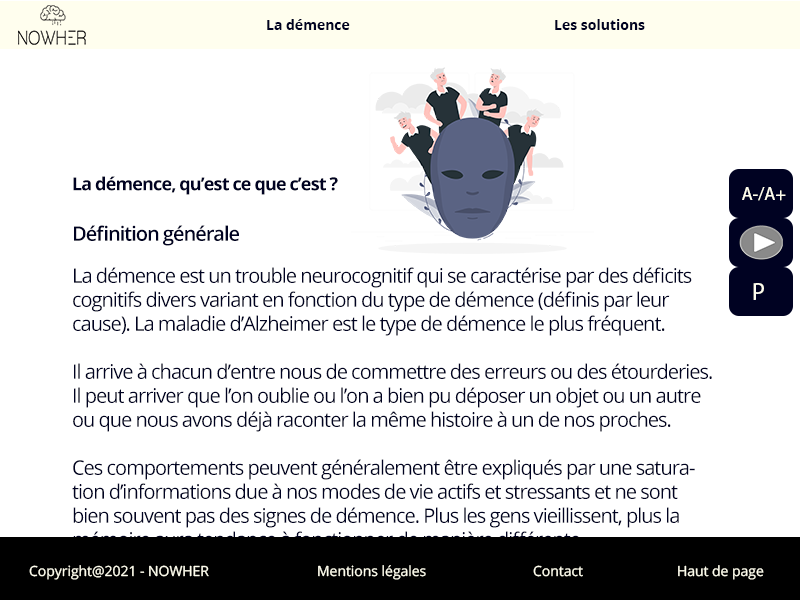
<style>
.page{position:relative;width:800px;height:600px;background:#ffffff}
.page>*{position:absolute;margin:0}
.t1{font:14px "OpenSans-Bold";color:#000222}
.t2{font:12px "MyriadPro-Regular";color:#000222}
.t3{font:18px "OpenSans-Bold";letter-spacing:-0.05em;color:#000222}
.t4{font:18px "MyriadPro-Regular";color:#fffeee}
.t5{font:20px/24px "OpenSans-Regular";letter-spacing:-0.05em;color:#000222}
.t6{font:20px/18px "OpenSans-SemiBold";letter-spacing:-0.05em;color:#000222}
.t7{font:20px/18px "OpenSans-Regular";letter-spacing:-0.05em;color:#000222}
.t8{font:24px "MyriadPro-Regular";color:#fffeee}
.t9{font:14px "OpenSans-Regular";color:#fffeee}
.t10{font:12.1px "MyriadPro-Regular";color:#fffeee}
</style>
<div class="page">
<p class="t1" style="left:267px;top:19px;width:378px;height:11px"><span class="t2"><br>                                                </span>La démence      Les solutions</p>
<p class="t3" style="left:73px;top:176px;width:265px;height:19px">La démence, qu’est ce que c’est ?</p>
<p class="t4" style="left:742px;top:187px;width:44px;height:14px">A-/A+</p>
<p class="t5" style="left:72px;top:225px;width:640px;height:322px"><span class="t6">Définition générale<br><br></span>La démence est un trouble neurocognitif qui se caractérise par des déficits cognitifs divers variant en fonction du type de démence (définis par leur cause). La maladie d’Alzheimer est le type de démence le plus fréquent.<br><br>Il arrive à chacun d’entre nous de commettre des erreurs ou des étourderies. Il peut arriver que l’on oublie ou l’on a bien pu déposer un objet ou un autre ou que nous avons déjà raconter la même histoire à un de nos proches.<br><br>Ces comportements peuvent généralement être expliqués par une saturation d’informations due à nos modes de vie actifs et stressants et ne sont bien souvent pas des signes de démence. Plus les gens vieillissent, plus la mémoire aura tendance à fonctionner de manière différente. <br><br>Il se peut, par exemple, que le cerveau ne traite plus aussi rapidement les informations qui lui parviennent. Ce type de modifications de fonctionnement du cerveau est normal et n’interfère que peu avec la vie quotidienne. A l’inverse, la démence est invalidante et n’est pas attribuée au processus <span class="t7">normal de vieillissement.<br><br>Bien que la démence ait tendance à se manifester différemment chez chaque individu, nous pouvons recenser un certain nombre de symptômes fréquents commun aux personnes atteintes :</span></p>
<p class="t8" style="left:753px;top:283px;width:11px;height:17px">P</p>
<p class="t9" style="left:29px;top:565px;width:735px;height:15px"><span class="t10"><br><br><br><br>  </span>Copyright@2021 - NOWHER    Mentions légales    Contact    Haut de page</p>
</div>
